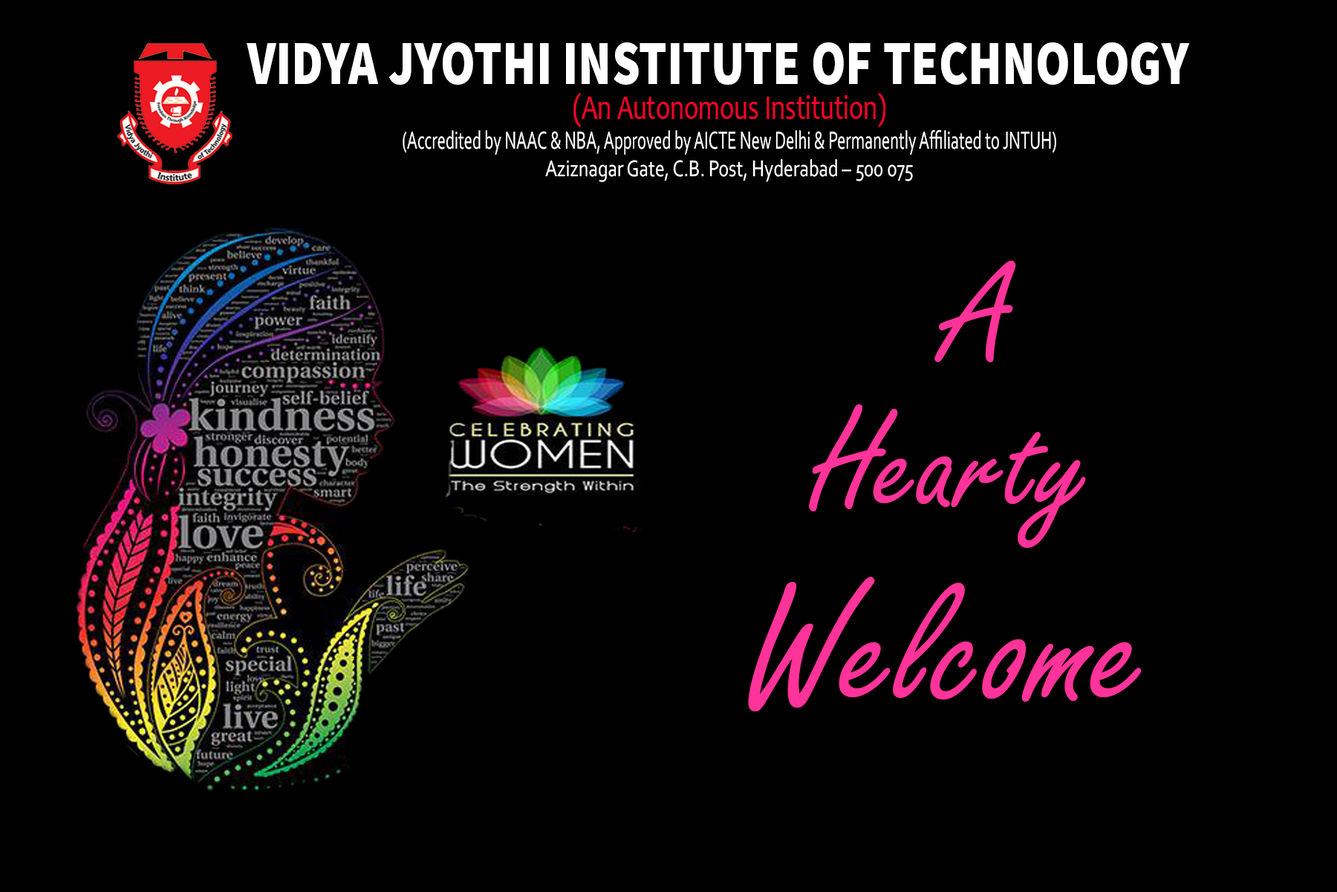
<style>
.page{position:relative;width:1337px;height:892px;background:#000000}
.page>*{position:absolute;margin:0}
.t1{font:61.9px "SourceSansPro-Black";color:#ffffff;scale:0.81 1}
.t2{font:34.6px "Candara";color:#ff002a;scale:0.74 1}
.t3{font:25.9px "Corbel";color:#ffffff;scale:0.64 1}
.t4{font:23.7px "Corbel";color:#ffffff;scale:0.8 1}
.t5{font:148.6px "FreestyleScript-Regular";color:#ff3399}
.t6{font:185.8px "FreestyleScript-Regular";color:#ff3399}
</style>
<div class="page">
<p class="t1" style="left:247px;top:42px;width:943px;height:43px">VIDYA JYOTHI INSTITUTE OF TECHNOLOGY</p>
<p class="t2" style="left:574px;top:93px;width:312px;height:34px">(An Autonomous Institution)</p>
<p class="t3" style="left:403px;top:129px;width:654px;height:26px">(Accredited by NAAC &amp; NBA, Approved by AICTE New Delhi &amp; Permanently Affiliated to JNTUH)</p>
<p class="t4" style="left:545px;top:159px;width:368px;height:23px">Aziznagar Gate, C.B. Post, Hyderabad – 500 075</p>
<p class="t5" style="left:935px;top:260px;width:81px;height:103px">A</p>
<p class="t5" style="left:809px;top:404px;width:277px;height:144px">Hearty</p>
<p class="t6" style="left:748px;top:577px;width:394px;height:134px">Welcome</p>
</div>
